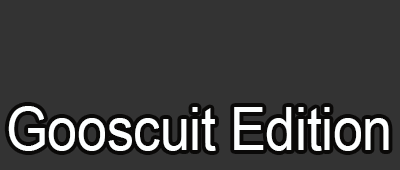
<style>
.page{position:relative;width:400px;height:170px;background:#333333}
.page>*{position:absolute;margin:0}
.t1{font:59.8px "ArialMT";letter-spacing:-0.01em;color:#fdffff;scale:0.91 1}
</style>
<div class="page">
<p class="t1" style="left:8px;top:106px;width:381px;height:45px">Gooscuit Edition</p>
</div>
